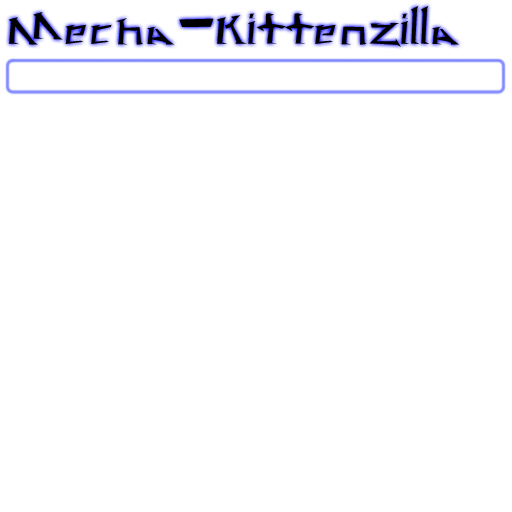
<style>
.page{position:relative;width:512px;height:512px;background:#ffffff}
.page>*{position:absolute;margin:0}
.t1{font:24px "rachalia";color:#000000}
</style>
<div class="page">
<p class="t1" style="left:8px;top:5px;width:452px;height:42px">Mecha-Kittenzilla</p>
</div>
